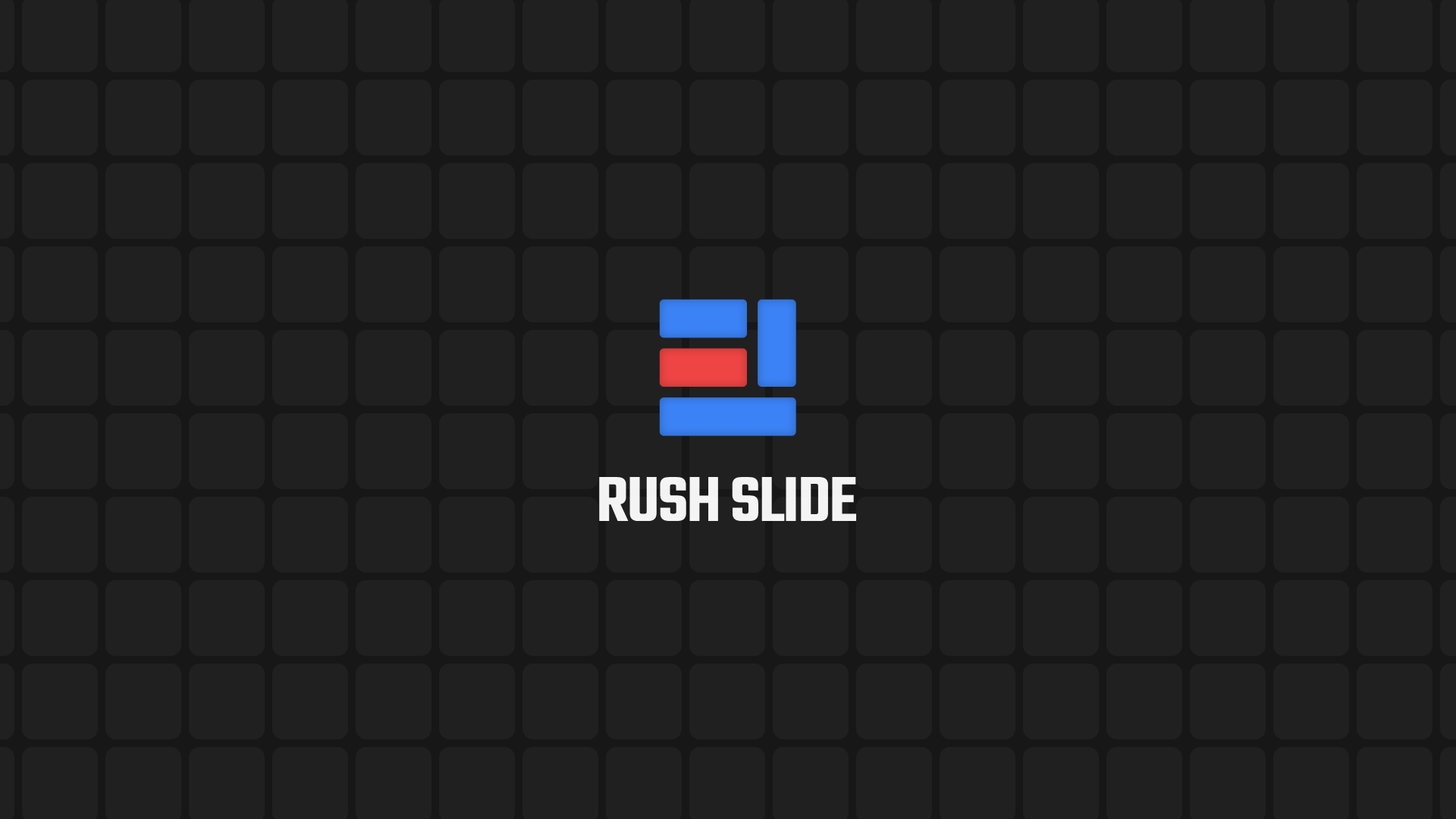
<style>
.page{position:relative;width:1456px;height:819px;background:#202020}
.page>*{position:absolute;margin:0}
.t1{font:69px "Teko-SemiBold";letter-spacing:-0.025em;color:#ffffff}
</style>
<div class="page">
<p class="t1" style="left:599px;top:477px;width:258px;height:44px;opacity:0.95">RUSH SLIDE</p>
</div>
